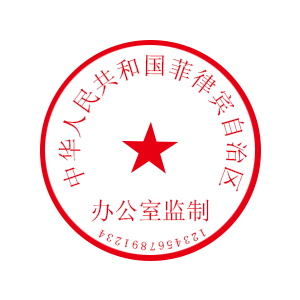
<style>
.page{position:relative;width:300px;height:300px;background:#ffffff}
.page>*{position:absolute;margin:0}
.t1{font:24px "SimSun";color:#e60012}
.t2{font:12px "SimSun";letter-spacing:0.2em}
</style>
<div class="page">
<p class="t1" style="left:58px;top:54px;width:190px;height:138px;rotate:-30deg">中华人民共和国菲律宾自治区</p>
<p class="t1" style="left:91px;top:199px;width:118px;height:23px">办公室监制</p>
<p class="t2" style="left:98px;top:228px;width:108px;height:23px;rotate:-66deg">1234567891234</p>
</div>
